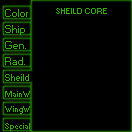
<style>
.page{position:relative;width:132px;height:132px;background:#000000}
.page>*{position:absolute;margin:0}
.t1{font:10px "Small Fonts";color:#31af00}
.t2{font:8px "Small Fonts";color:#31af00}
.t3{font:9px "Small Fonts";color:#31af00}
</style>
<div class="page">
<p class="t1" style="left:5px;top:9px;width:23px;height:8px">Color</p>
<p class="t2" style="left:56px;top:8px;width:51px;height:6px">SHEILD CORE</p>
<p class="t1" style="left:5px;top:25px;width:20px;height:10px">Ship</p>
<p class="t1" style="left:5px;top:41px;width:21px;height:8px">Gen.</p>
<p class="t1" style="left:5px;top:57px;width:20px;height:8px">Rad.</p>
<p class="t3" style="left:5px;top:74px;width:24px;height:7px">Sheild</p>
<p class="t2" style="left:5px;top:91px;width:25px;height:6px">MainW</p>
<p class="t2" style="left:5px;top:123px;width:25px;height:8px">Special</p>
</div>
